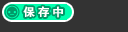
<style>
.page{position:relative;width:128px;height:32px;background:#333333}
.page>*{position:absolute;margin:0}
.t1{font:11.4px "FZDHTK--GBK1-0";letter-spacing:0.2em;color:#ffffff;scale:1.05 1}
</style>
<div class="page">
<p class="t1" style="left:23px;top:6px;width:40px;height:12px">保存中</p>
</div>
